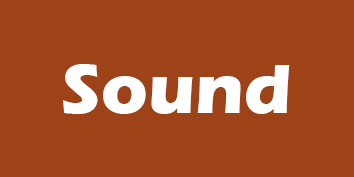
<style>
.page{position:relative;width:354px;height:177px;background:#9e4217}
.page>*{position:absolute;margin:0}
.t1{font:72px "ErasITC-Bold";color:#ffffff}
</style>
<div class="page">
<p class="t1" style="left:63px;top:64px;width:227px;height:50px">Sound</p>
</div>
